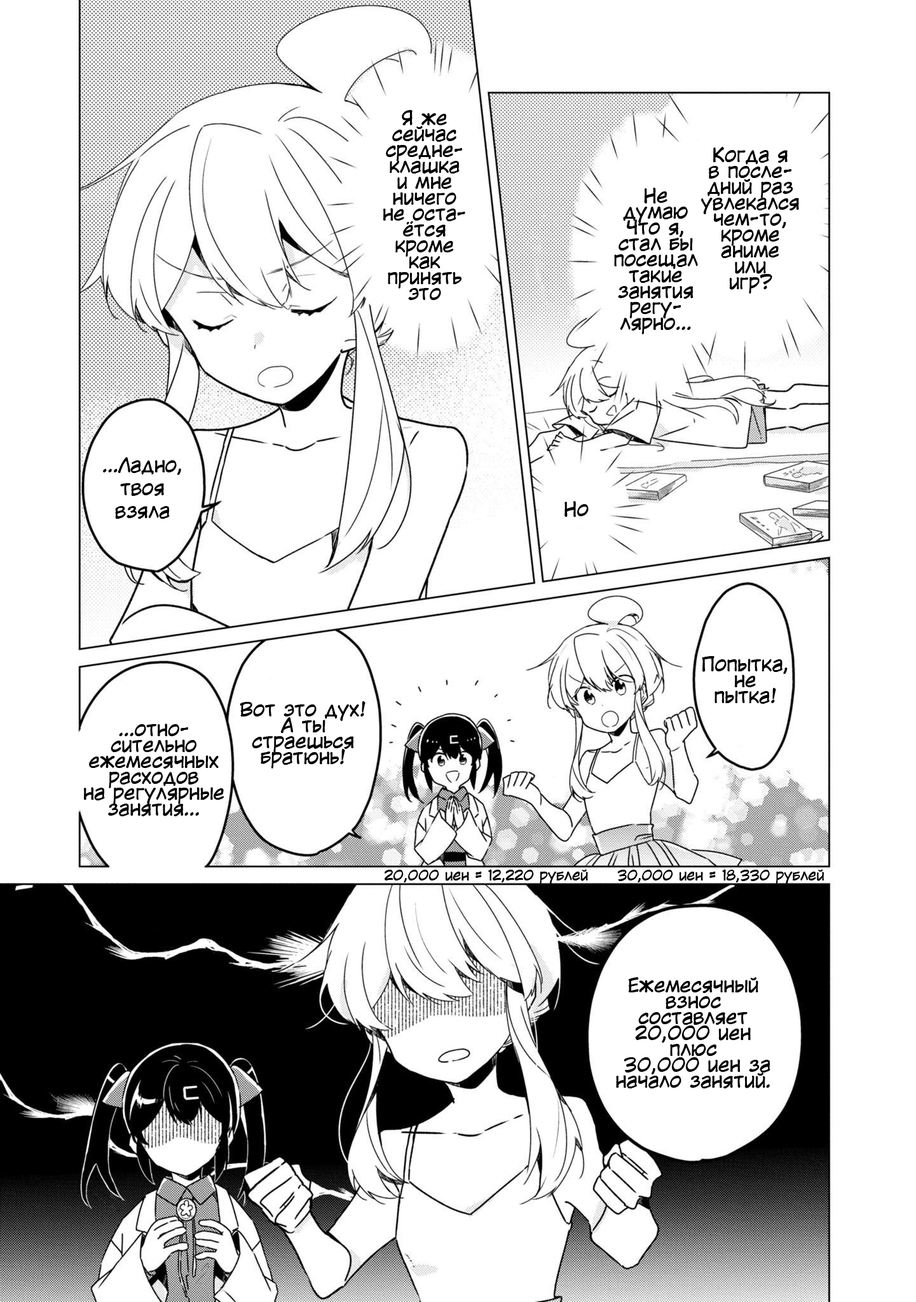
<style>
.page{position:relative;width:916px;height:1302px;background:#ffffff}
.page>*{position:absolute;margin:0}
.t1{font:19.1px/15.9px "KuraiVoice2";color:#000000}
.t2{font:19.1px "KuraiVoice2";color:#000000}
.t3{font:14px "KuraiVoice2";color:#000000}
</style>
<div class="page">
<p class="t1" style="left:383px;top:110px;width:82px;height:190px;text-align:center">Я же<br>сейчас<br>средне-<br>клашка<br>и мне<br>ничего<br>не оста-<br>ётся<br>кроме<br>как<br>принять<br>это</p>
<p class="t1" style="left:701px;top:147px;width:98px;height:147px;text-align:center">Когда я<br>в после-<br>дний раз<br>увлекался<br>чем-то,<br>кроме<br>аниме<br>или<br>игр?</p>
<p class="t1" style="left:614px;top:188px;width:84px;height:146px;text-align:center">Не<br>думаю<br>Что я,<br>стал бы<br>посещал<br>такие<br>занятия<br>регу-<br>лярно...</p>
<p class="t2" style="left:103px;top:457px;width:78px;height:62px;text-align:center">...Ладно,<br>твоя<br>взяла</p>
<p class="t2" style="left:564px;top:501px;width:25px;height:16px">Но</p>
<p class="t1" style="left:702px;top:656px;width:86px;height:48px;text-align:center">Попытка,<br>не<br>пытка!</p>
<p class="t1" style="left:240px;top:701px;width:126px;height:68px;text-align:center">Вот это дух!<br>А ты<br>страешься<br>братюнь!</p>
<p class="t1" style="left:83px;top:723px;width:141px;height:93px;text-align:center">...отно-<br>сительно<br>ежемесячных<br>расходов<br>на регулярные<br>занятия...</p>
<p class="t3" style="left:384px;top:869px;width:440px;height:15px">20,000 иен = 12,220 рублей     30,000 иен = 18,330 рублей</p>
<p class="t1" style="left:616px;top:977px;width:154px;height:111px;text-align:center">Ежемесячный<br>взнос<br>составляет<br>20,000 иен<br>плюс<br> 30,000 иен за<br>начало занятий.</p>
</div>
